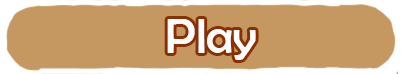
<style>
.page{position:relative;width:401px;height:74px;background:#c59761}
.page>*{position:absolute;margin:0}
.t1{font:48.9px "BerlinSansFB-Reg";color:#fefefe}
</style>
<div class="page">
<p class="t1" style="left:167px;top:19px;width:89px;height:41px">Play</p>
</div>
